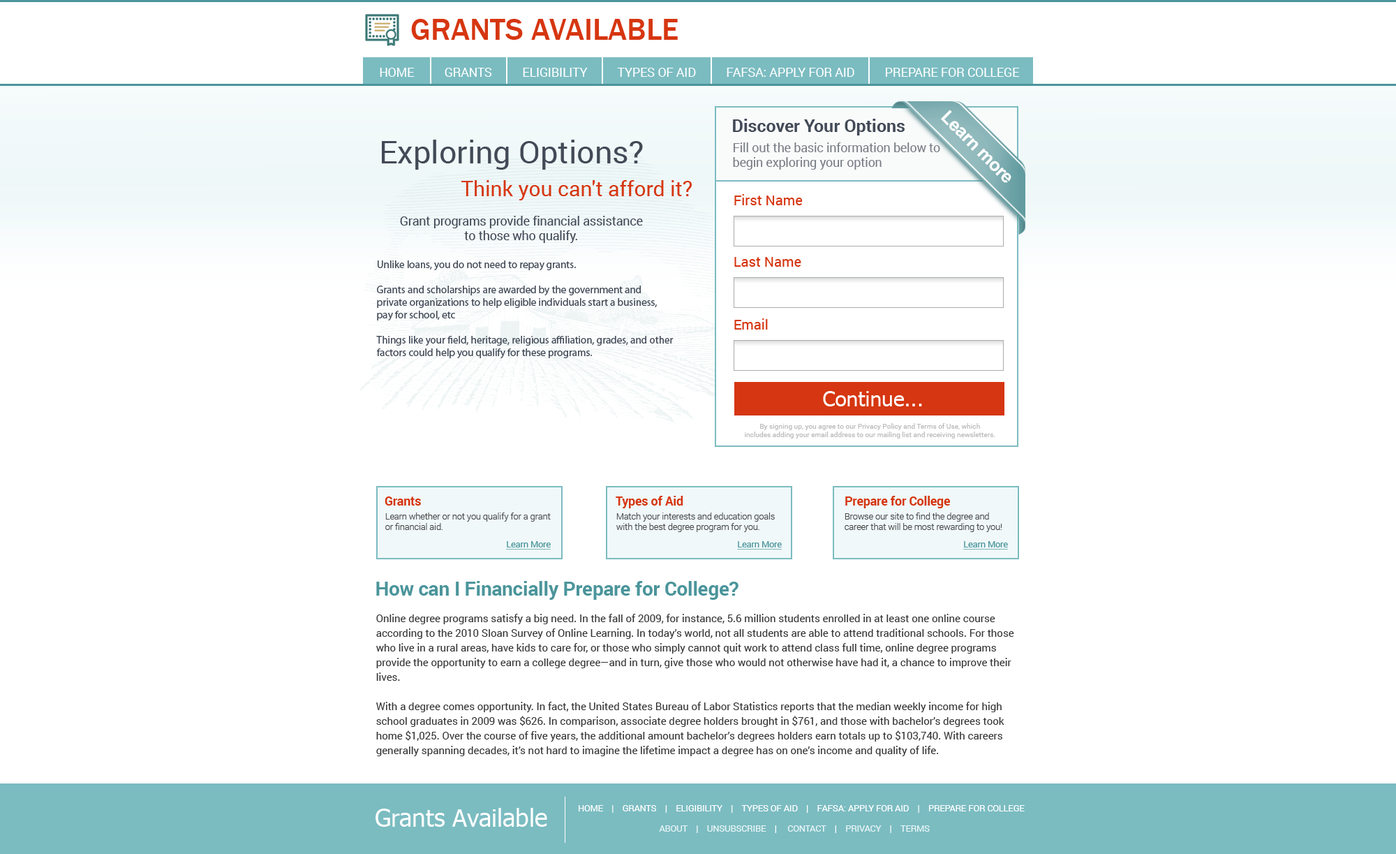
<style>
.page{position:relative;width:1396px;height:854px;background:#ffffff}
.page>*{position:absolute;margin:0}
.t1{font:31.4px "FranklinGothic-Medium";color:#d63611;text-transform:uppercase}
.t2{font:12.2px "Roboto-Regular";color:#ffffff}
.t3{font:17.5px "Roboto-Bold";color:#424a57}
.t4{font:31.4px "Roboto-Regular";color:#424a57}
.t5{font:12.2px "Roboto-Regular";color:#797e86}
.t6{font:20.9px "Roboto-Regular";color:#d63611}
.t7{font:14px "Roboto-Regular";color:#d63611}
.t8{font:12.2px "Roboto-Regular";color:#424a57}
.t9{font:10.5px "MyriadPro-Regular";color:#424a57}
.t10{font:20.9px "Tahoma";color:#ffffff}
.t11{font:7px "Roboto-Regular";color:#bababa}
.t12{font:12.2px "Roboto-Bold";color:#d63611}
.t13{font:8.7px "Roboto-Light";color:#474747}
.t14{font:8.7px "Roboto-Regular";color:#4b959b;text-decoration:underline}
.t15{font:19.2px "Roboto-Bold";color:#4b959b}
.t16{font:10.5px/14.7px "Roboto-Regular";color:#363636}
.t17{font:24.4px "Tahoma";color:#ffffff}
.t18{font:8.7px "Roboto-Regular";color:#ffffff}
.t19{font:8.7px "Roboto-Regular";color:#e9f5f6;text-transform:uppercase}
.t20{font:8.7px "Roboto-Regular";color:#ffffff;text-transform:uppercase}
</style>
<div class="page">
<p class="t1" style="left:411px;top:19px;width:267px;height:21px">Grants Available</p>
<p class="t2" style="left:380px;top:68px;width:640px;height:9px">HOME          GRANTS          ELIGIBILITY          TYPES OF AID          FAFSA: APPLY FOR AID          PREPARE FOR COLLEGE</p>
<p class="t3" style="left:733px;top:119px;width:172px;height:16px">Discover Your Options</p>
<p class="t4" style="left:382px;top:140px;width:261px;height:30px">Exploring Options?</p>
<p class="t5" style="left:733px;top:142px;width:207px;height:28px">Fill out the basic information below to <br>begin exploring your option</p>
<p class="t6" style="left:462px;top:180px;width:230px;height:20px">Think you can't afford it?</p>
<p class="t7" style="left:735px;top:194px;width:68px;height:11px">First Name</p>
<p class="t8" style="left:400px;top:216px;width:243px;height:27px;text-align:center">Grant programs provide financial assistance<br>to those who qualify.</p>
<p class="t7" style="left:735px;top:257px;width:67px;height:10px">Last Name</p>
<p class="t9" style="left:376px;top:260px;width:298px;height:98px">Unlike loans, you do not need to repay grants.<br><br>Grants and scholarships are awarded by the government and <br>private organizations to help eligible individuals start a business, <br>pay for school, etc<br><br>Things like your field, heritage, religious affiliation, grades, and other <br>factors could help you qualify for these programs.</p>
<p class="t7" style="left:735px;top:318px;width:33px;height:12px">Email</p>
<p class="t10" style="left:823px;top:391px;width:99px;height:15px">Continue...</p>
<p class="t11" style="left:745px;top:423px;width:251px;height:15px;text-align:center">By signing up, you agree to our Privacy Policy and Terms of Use, which<br>includes adding your email address to our mailing list and receiving newsletters.</p>
<p class="t12" style="left:385px;top:496px;width:36px;height:10px">Grants</p>
<p class="t12" style="left:616px;top:496px;width:68px;height:12px">Types of Aid</p>
<p class="t12" style="left:846px;top:496px;width:104px;height:12px">Prepare for College</p>
<p class="t13" style="left:385px;top:512px;width:166px;height:18px">Learn whether or not you qualify for a grant<br>or financial aid.</p>
<p class="t13" style="left:617px;top:512px;width:158px;height:20px">Match your interests and education goals<br>with the best degree program for you.</p>
<p class="t13" style="left:845px;top:512px;width:157px;height:20px">Browse our site to find the degree and <br>career that will be most rewarding to you!</p>
<p class="t14" style="left:506px;top:541px;width:45px;height:8px">Learn More</p>
<p class="t14" style="left:737px;top:541px;width:45px;height:8px">Learn More</p>
<p class="t14" style="left:964px;top:541px;width:44px;height:8px">Learn More</p>
<p class="t15" style="left:376px;top:581px;width:363px;height:19px">How can I Financially Prepare for College?</p>
<p class="t16" style="left:376px;top:614px;width:639px;height:142px">Online degree programs satisfy a big need. In the fall of 2009, for instance, 5.6 million students enrolled in at least one online course according to the 2010 Sloan Survey of Online Learning. In today’s world, not all students are able to attend traditional schools. For those who live in a rural areas, have kids to care for, or those who simply cannot quit work to attend class full time, online degree programs provide the opportunity to earn a college degree—and in turn, give those who would not otherwise have had it, a chance to improve their lives. <br><br>With a degree comes opportunity. In fact, the United States Bureau of Labor Statistics reports that the median weekly income for high school graduates in 2009 was $626. In comparison, associate degree holders brought in $761, and those with bachelor’s degrees took home $1,025. Over the course of five years, the additional amount bachelor’s degrees holders earn totals up to $103,740. With careers generally spanning decades, it’s not hard to imagine the lifetime impact a degree has on one’s income and quality of life.</p>
<p class="t17" style="left:376px;top:808px;width:171px;height:19px">Grants Available</p>
<p class="t18" style="left:579px;top:805px;width:446px;height:8px">HOME    |    GRANTS    |    ELIGIBILITY    |    TYPES OF AID    |    FAFSA: APPLY FOR AID    |    PREPARE FOR COLLEGE</p>
<p class="t19" style="left:659px;top:825px;width:271px;height:8px">About<span class="t20">    |    </span>Unsubscribe<span class="t20">    |    </span> Contact<span class="t20">    |    </span>Privacy<span class="t20">    |    </span>Terms</p>
</div>
